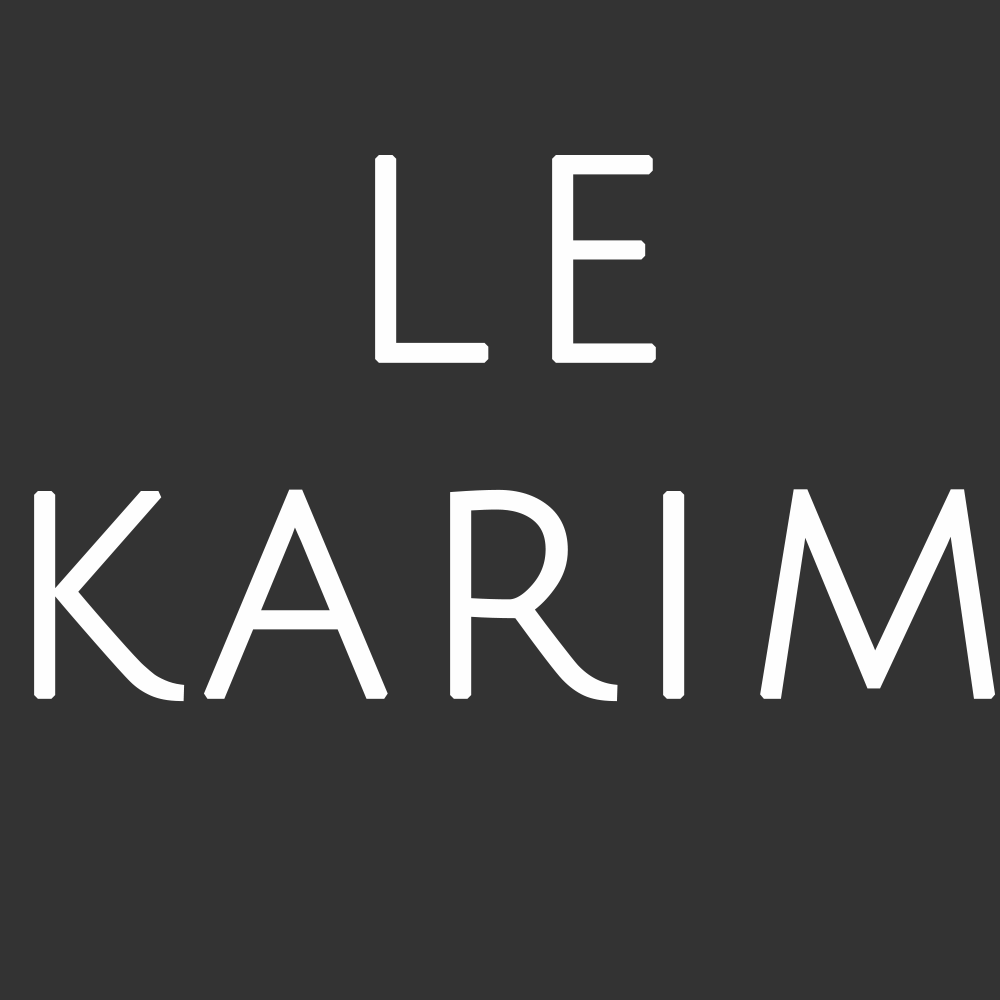
<style>
.page{position:relative;width:1000px;height:1000px;background:#333333}
.page>*{position:absolute;margin:0}
.t1{font:280px "JuliusSansOne-Regular";letter-spacing:0.075em;color:#fefefe;font-weight:bold}
</style>
<div class="page">
<p class="t1" style="left:34px;top:155px;width:962px;height:547px;text-align:center">LE<br>KARIM</p>
</div>
